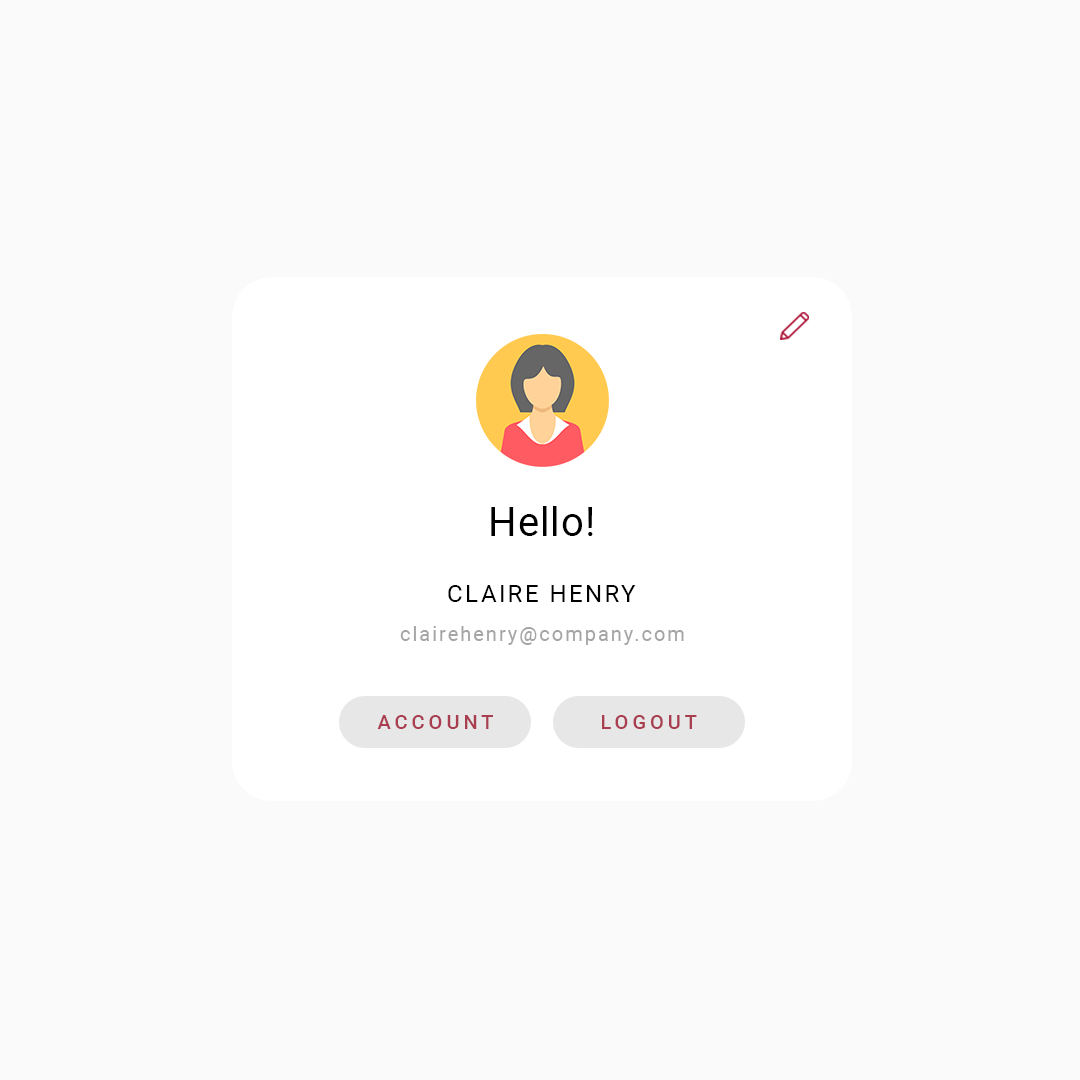
<style>
.page{position:relative;width:1080px;height:1080px;background:#fafafa}
.page>*{position:absolute;margin:0}
.t1{font:40px "Roboto-Regular";letter-spacing:0.025em;color:#000000}
.t2{font:24px "Roboto-Regular";letter-spacing:0.1em;color:#000000}
.t3{font:20px "Roboto-Regular";letter-spacing:0.1em;color:#a5a5a5}
.t4{font:20px "Roboto-Medium";letter-spacing:0.2em;color:#a93e50}
</style>
<div class="page">
<p class="t1" style="left:491px;top:506px;width:102px;height:30px">Hello!</p>
<p class="t2" style="left:448px;top:585px;width:188px;height:17px">CLAIRE HENRY</p>
<p class="t3" style="left:400px;top:626px;width:284px;height:19px">clairehenry@company.com</p>
<p class="t4" style="left:377px;top:715px;width:116px;height:14px">ACCOUNT</p>
<p class="t4" style="left:602px;top:715px;width:95px;height:14px">LOGOUT</p>
</div>
